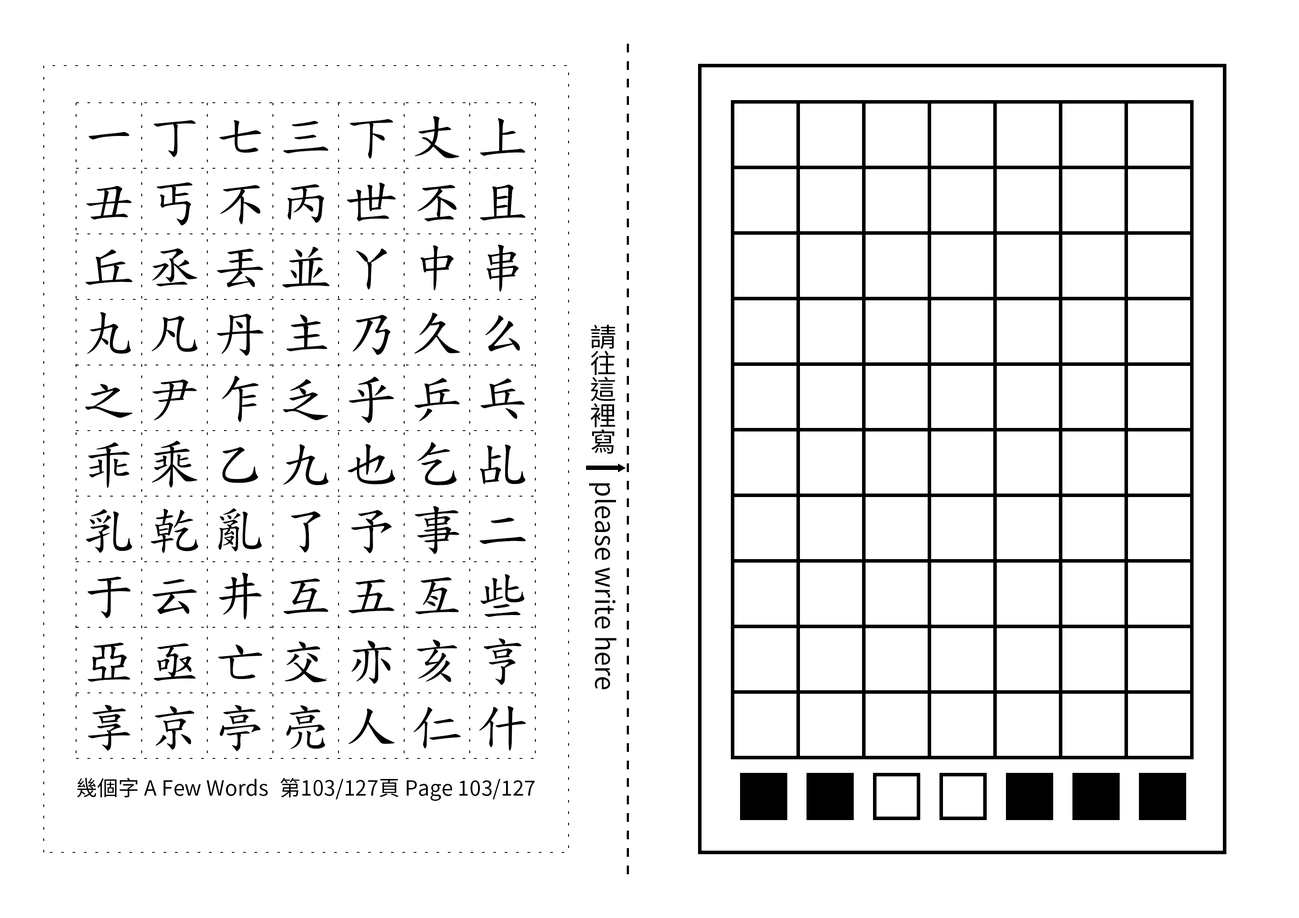
<style>
.page{position:relative;width:1299px;height:918px;background:#ffffff}
.page>*{position:absolute;margin:0}
.t1{font:52.5px/65.6px "TW-Kai-98_1";letter-spacing:0.25em;color:#000000}
.t2{font:26.2px "SourceHanSansTC-Regular";color:#000000}
.t3{font:21px "SourceHanSansTC-Regular";color:#000000}
</style>
<div class="page">
<p class="t1" style="left:85px;top:116px;width:441px;height:636px;text-align:center">一丁七三下丈上丑丐不丙世丕且丘丞丟並丫中串丸凡丹主乃久么之尹乍乏乎乒乓乖乘乙九也乞乩乳乾亂了予事二于云井互五亙些亞亟亡交亦亥亨享京亭亮人仁什</p>
<p class="t2" style="left:589px;top:324px;width:28px;height:366px;text-align:center">請往這裡寫　please write here</p>
<p class="t3" style="left:77px;top:778px;width:191px;height:20px">幾個字 A Few Words</p>
<p class="t3" style="left:280px;top:778px;width:255px;height:23px">第103/127頁 Page 103/127</p>
</div>
